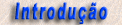
<style>
.page{position:relative;width:122px;height:25px}
.page>*{position:absolute;margin:0}
.t1{font:22.9px "Arial-Black";letter-spacing:0.1em;font-weight:bold;font-style:italic;scale:0.57 1}
</style>
<div class="page">
<p class="t1" style="left:15px;top:2px;width:93px;height:22px">Introdução</p>
</div>
